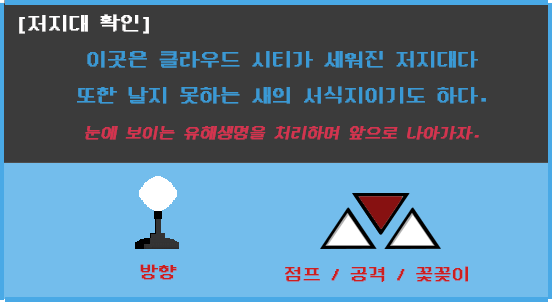
<style>
.page{position:relative;width:552px;height:302px;background:#3b3b3b}
.page>*{position:absolute;margin:0}
.t1{font:20px "DungGeunMo";color:#fffefe;font-weight:bold}
.t2{font:20px/36px "DungGeunMo";color:#3a99d5;font-weight:bold}
.t3{font:20px/36px "DungGeunMo";color:#49a9e6;font-weight:bold}
.t4{font:16px/36px "DungGeunMo";color:#d5334e;font-weight:bold;font-style:italic}
.t5{font:18px "DungGeunMo";color:#cd1f1f;font-weight:bold}
</style>
<div class="page">
<p class="t1" style="left:19px;top:14px;width:130px;height:20px">[저지대 확인]</p>
<p class="t2" style="left:77px;top:51px;width:409px;height:89px;text-align:center"><span class="t3"><br></span>이곳은 클라우드 시티가 세워진 저지대다<br>또한 날지 못하는 새의 서식지이기도 하다.<br><span class="t4">눈에 보이는 유해생명을 처리하며 앞으로 나아가자.</span></p>
<p class="t5" style="left:140px;top:264px;width:37px;height:16px">방향</p>
<p class="t5" style="left:285px;top:266px;width:183px;height:16px">점프 / 공격 / 꽃꽂이</p>
</div>
